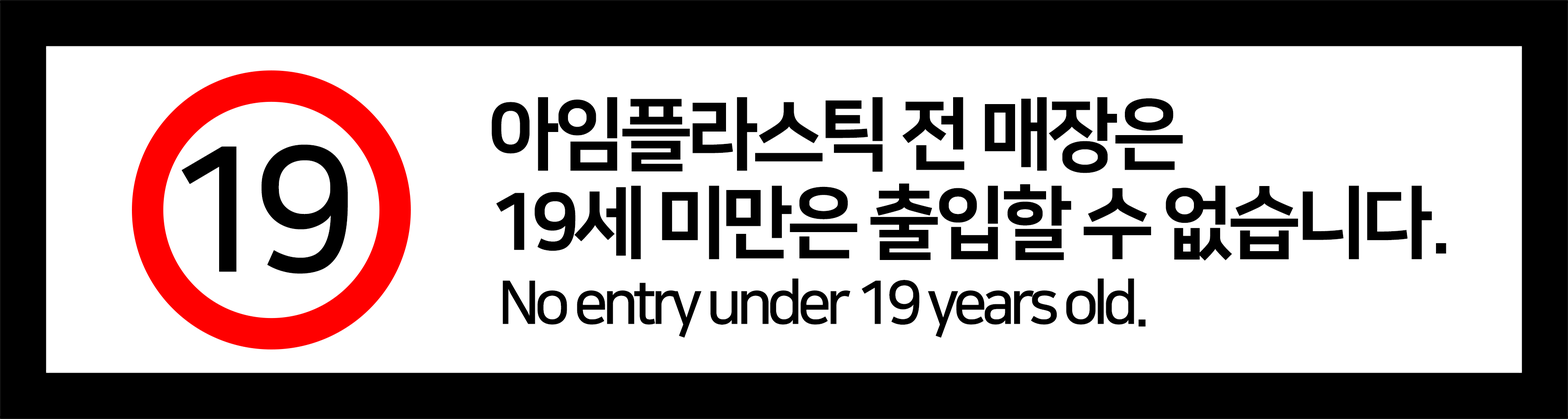
<style>
.page{position:relative;width:1568px;height:419px;background:#ffffff}
.page>*{position:absolute;margin:0}
.t1{font:79px/88.5px "NanumSquareEB";letter-spacing:-0.07em;color:#000000;text-transform:uppercase}
.t2{font:173.4px "NanumSquareB";letter-spacing:-0.09em;color:#000000}
.t3{font:60px "NanumSquareB";letter-spacing:-0.09em;color:#000000}
</style>
<div class="page">
<p class="t1" style="left:491px;top:97px;width:955px;height:164px">아임플라스틱 전 매장은<br>19세 미만은 출입할 수 없습니다.</p>
<p class="t2" style="left:182px;top:144px;width:166px;height:130px">19</p>
<p class="t3" style="left:502px;top:278px;width:644px;height:60px">No entry under 19 years old.</p>
</div>
